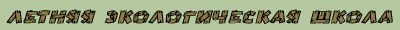
<style>
.page{position:relative;width:400px;height:30px;background:#b5c9a1}
.page>*{position:absolute;margin:0}
.t1{font:16px "WoodHome";color:#000000;font-weight:bold}
</style>
<div class="page">
<p class="t1" style="left:6px;top:9px;width:387px;height:15px">Летняя Экологическая школа</p>
</div>
